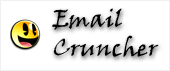
<style>
.page{position:relative;width:170px;height:71px;background:#ffffff}
.page>*{position:absolute;margin:0}
.t1{font:24px "VinerHandITC";color:#000100}
</style>
<div class="page">
<p class="t1" style="left:52px;top:8px;width:107px;height:49px">Email<br>Cruncher</p>
</div>
